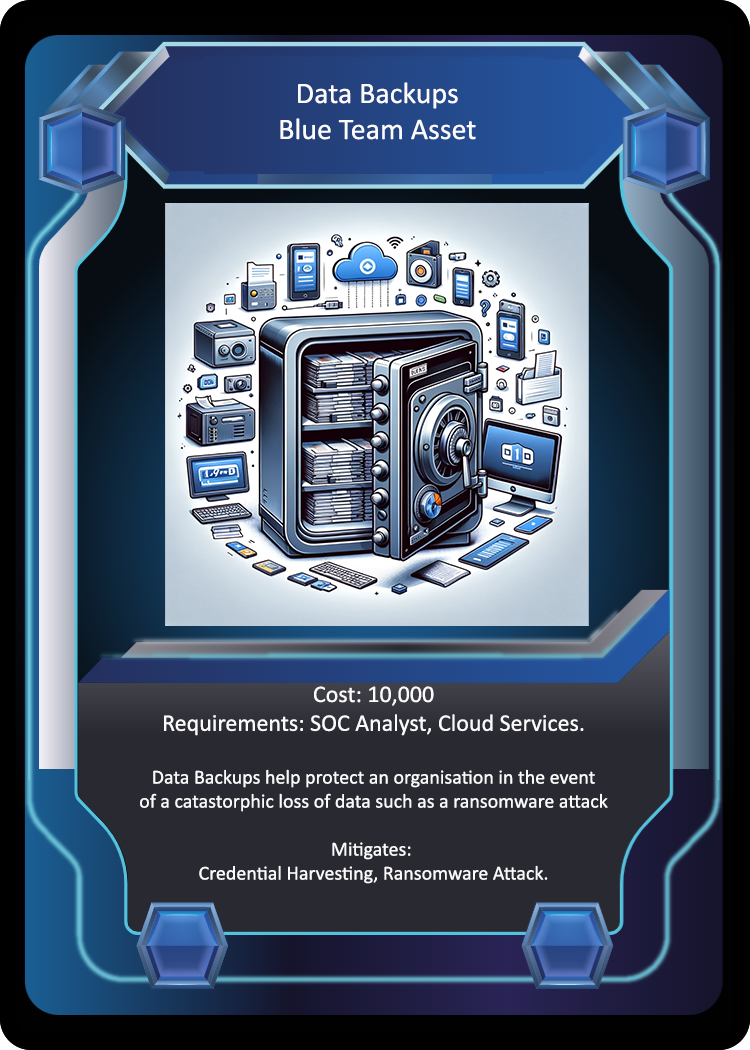
<style>
.page{position:relative;width:750px;height:1050px}
.page>*{position:absolute;margin:0}
.t1{font:30px "Calibri";color:#fcfbfb}
.t2{font:20px "Calibri";color:#fcfbfb}
.t3{font:24px "Calibri";color:#fcfbfb}
</style>
<div class="page">
<p class="t1" style="left:280px;top:82px;width:196px;height:58px;text-align:center">Data Backups<br>Blue Team Asset</p>
<p class="t2" style="left:140px;top:686px;width:468px;height:198px;text-align:center"><span class="t3">Cost: 10,000<br>Requirements: SOC Analyst, Cloud Services.<br><br></span>Data Backups help protect an organisation in the event<br>of a catastorphic loss of data such as a ransomware attack<br><br>Mitigates: <br>Credential Harvesting, Ransomware Attack.</p>
</div>
